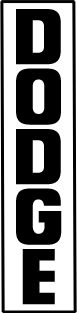
<style>
.page{position:relative;width:77px;height:313px;background:#ffffff}
.page>*{position:absolute;margin:0}
.t1{font:72px/60px "NeographikMT";color:#000000}
</style>
<div class="page">
<p class="t1" style="left:16px;top:9px;width:46px;height:296px;text-align:center">D<br>O<br>D<br>G<br>E</p>
</div>
